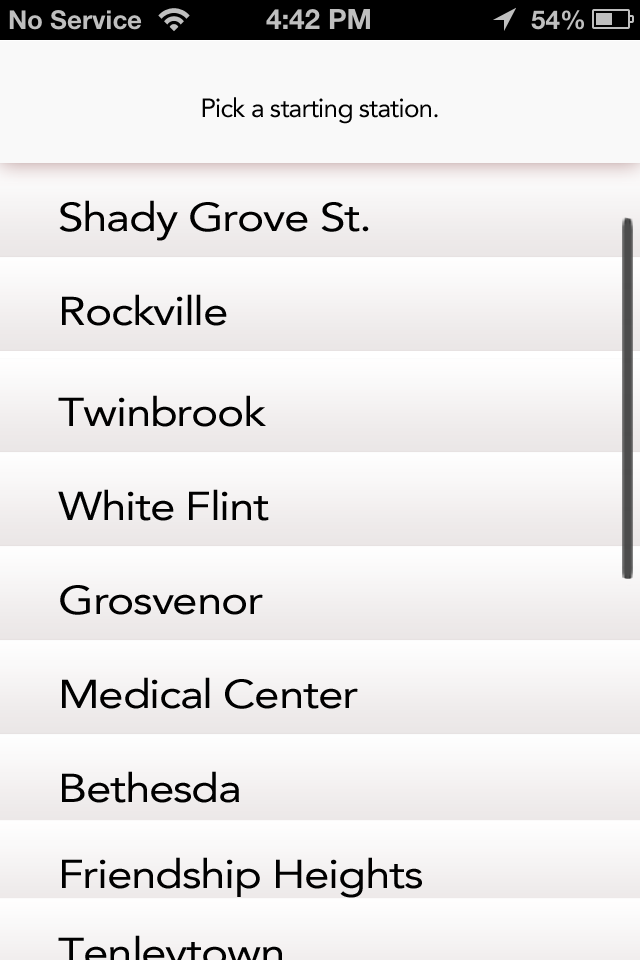
<style>
.page{position:relative;width:640px;height:960px}
.page>*{position:absolute;margin:0}
.t1{font:26px "Avenir-Roman";letter-spacing:-0.03em;color:#000000}
.t2{font:40px "Avenir-Roman";letter-spacing:-0.03em;color:#000000;scale:1.15 1}
</style>
<div class="page">
<p class="t1" style="left:202px;top:97px;width:236px;height:27px">Pick a starting station.</p>
<p class="t2" style="left:59px;top:200px;width:310px;height:41px">Shady Grove St.</p>
<p class="t2" style="left:62px;top:294px;width:165px;height:32px">Rockville</p>
<p class="t2" style="left:58px;top:395px;width:208px;height:32px">Twinbrook</p>
<p class="t2" style="left:58px;top:489px;width:211px;height:32px">White Flint</p>
<p class="t2" style="left:60px;top:585px;width:203px;height:30px">Grosvenor</p>
<p class="t2" style="left:62px;top:677px;width:296px;height:32px">Medical Center</p>
<p class="t2" style="left:62px;top:771px;width:177px;height:32px">Bethesda</p>
<p class="t2" style="left:62px;top:857px;width:360px;height:41px">Friendship Heights</p>
</div>
